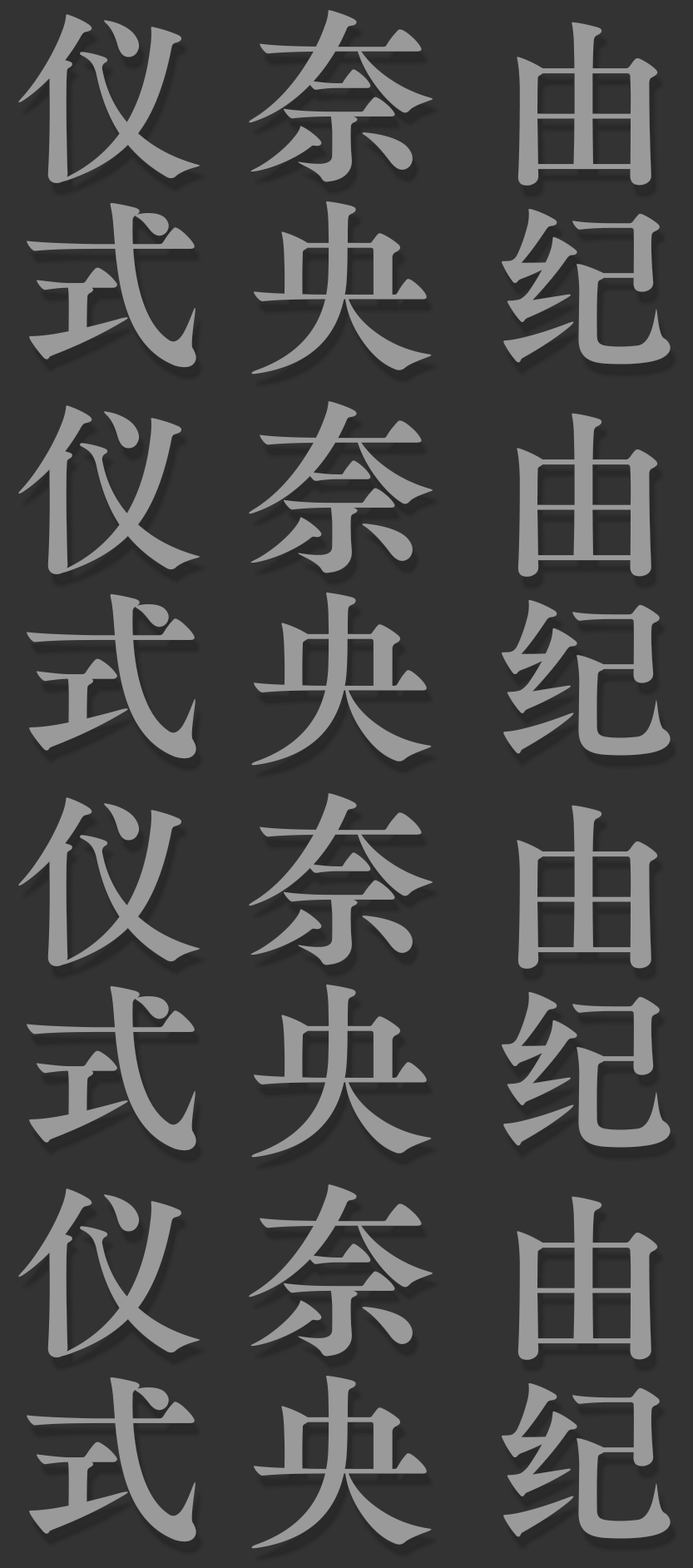
<style>
.page{position:relative;width:693px;height:1568px;background:#333333}
.page>*{position:absolute;margin:0}
.t1{font:187.1px "FZFW-ZhuZiAOldMin-B--GB1-0";color:#9a9a9a}
.t2{font:189.8px "FZFW-ZhuZiAOldMin-B--GB1-0";color:#9a9a9a}
.t3{font:183.3px "FZFW-ZhuZiAOldMin-B--GB1-0";color:#9a9a9a}
</style>
<div class="page">
<p class="t1" style="left:18px;top:14px;width:182px;height:354px">仪式</p>
<p class="t2" style="left:249px;top:10px;width:185px;height:365px">奈央</p>
<p class="t3" style="left:502px;top:22px;width:169px;height:343px">由纪</p>
<p class="t2" style="left:249px;top:401px;width:185px;height:365px">奈央</p>
<p class="t1" style="left:18px;top:405px;width:182px;height:354px">仪式</p>
<p class="t3" style="left:502px;top:413px;width:169px;height:343px">由纪</p>
<p class="t1" style="left:18px;top:797px;width:182px;height:354px">仪式</p>
<p class="t2" style="left:249px;top:793px;width:185px;height:365px">奈央</p>
<p class="t3" style="left:502px;top:805px;width:169px;height:343px">由纪</p>
<p class="t1" style="left:18px;top:1188px;width:182px;height:354px">仪式</p>
<p class="t2" style="left:249px;top:1184px;width:185px;height:365px">奈央</p>
<p class="t3" style="left:502px;top:1196px;width:169px;height:343px">由纪</p>
</div>
